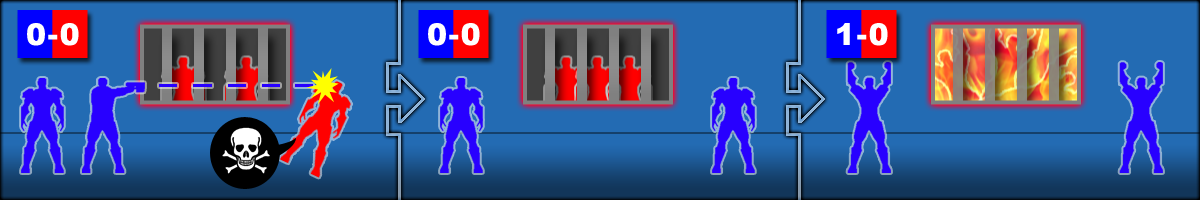
<style>
.page{position:relative;width:1200px;height:200px;background:#236bb3}
.page>*{position:absolute;margin:0}
.t1{font:30px "Arial-Black";letter-spacing:0.06em;color:#ffffff}
</style>
<div class="page">
<p class="t1" style="left:27px;top:23px;width:52px;height:23px">0-0</p>
<p class="t1" style="left:428px;top:23px;width:52px;height:23px">0-0</p>
<p class="t1" style="left:837px;top:23px;width:51px;height:23px">1-0</p>
</div>
